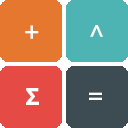
<style>
.page{position:relative;width:128px;height:128px;background:#e6772e}
.page>*{position:absolute;margin:0}
.t1{font:25px "MyriadPro-Bold";color:#ffffff}
</style>
<div class="page">
<p class="t1" style="left:25px;top:25px;width:14px;height:14px">+</p>
<p class="t1" style="left:90px;top:25px;width:13px;height:12px">^</p>
<p class="t1" style="left:26px;top:88px;width:13px;height:17px">Σ</p>
<p class="t1" style="left:89px;top:92px;width:13px;height:8px">=</p>
</div>
